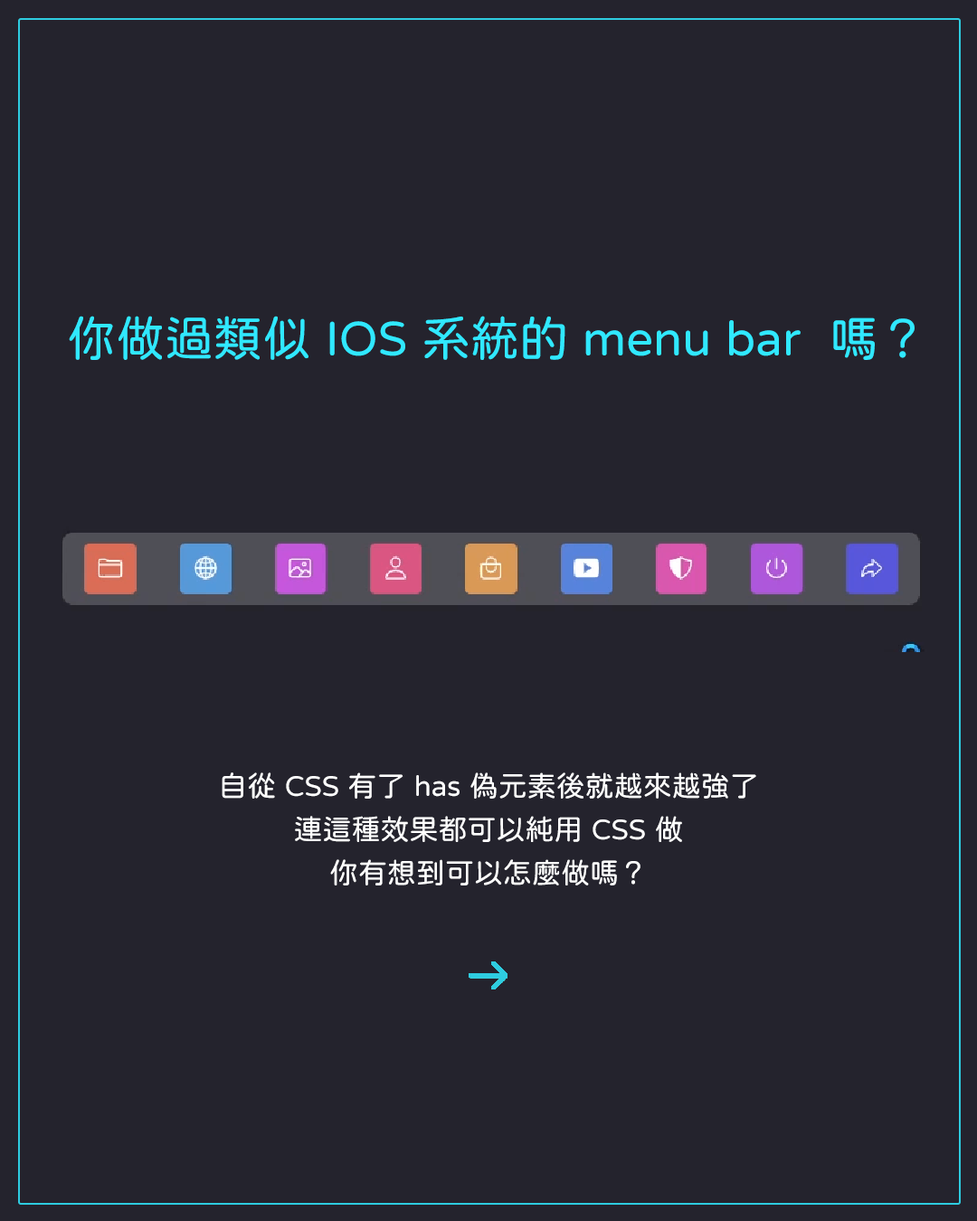
<style>
.page{position:relative;width:977px;height:1221px;background:#24232d}
.page>*{position:absolute;margin:0}
.t1{font:48.8px "jf-openhuninn-1.1";color:#30e8ff}
.t2{font:28.9px/43.4px "jf-openhuninn-1.1";color:#ffffff}
</style>
<div class="page">
<p class="t1" style="left:69px;top:316px;width:845px;height:44px">你做過類似 IOS 系統的 menu bar  嗎？</p>
<p class="t2" style="left:222px;top:772px;width:534px;height:113px;text-align:center">自從 CSS 有了 has 偽元素後就越來越強了<br>連這種效果都可以純用 CSS 做<br>你有想到可以怎麼做嗎？</p>
</div>
